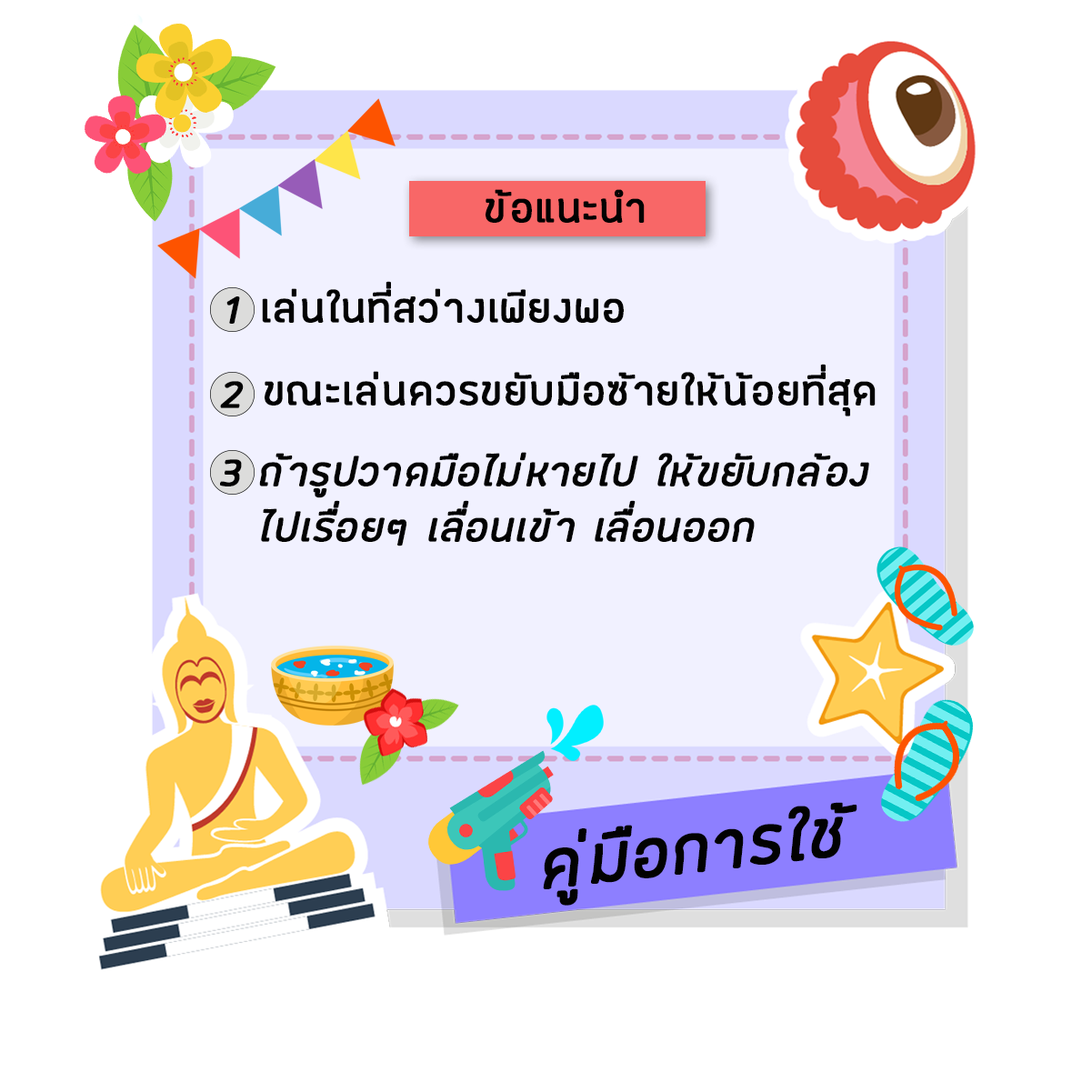
<style>
.page{position:relative;width:1092px;height:1092px;background:#ffffff}
.page>*{position:absolute;margin:0}
.t1{font:54.6px "FCLamoonRegular";letter-spacing:0.025em;color:#020202;font-weight:bold}
.t2{font:54.6px "FCLamoonRegularItalic";letter-spacing:0.025em;color:#020202;font-weight:bold}
.t3{font:54.6px/55.5px "FCLamoonRegularItalic";letter-spacing:0.025em;color:#020202;font-weight:bold}
.t4{font:89px "FCLamoonRegularItalic";letter-spacing:0.025em;color:#020202;font-weight:bold}
</style>
<div class="page">
<p class="t1" style="left:486px;top:189px;width:159px;height:34px">ข้อแนะนำ</p>
<p class="t1" style="left:262px;top:281px;width:362px;height:42px">เล่นในที่สว่างเพียงพอ</p>
<p class="t2" style="left:226px;top:296px;width:14px;height:28px">1</p>
<p class="t1" style="left:265px;top:364px;width:611px;height:52px">ขณะเล่นควรขยับมือซ้ายให้น้อยที่สุด</p>
<p class="t2" style="left:220px;top:381px;width:24px;height:27px">2</p>
<p class="t2" style="left:220px;top:459px;width:22px;height:27px">3</p>
<p class="t3" style="left:259px;top:452px;width:610px;height:94px">ถ้ารูปวาดมือไม่หายไป ให้ขยับกล้อง<br>ไปเรื่อยๆ เลื่อนเข้า เลื่อนออก</p>
<p class="t4" style="left:543px;top:802px;width:314px;height:104px;rotate:-6deg">คู่มือการใช้</p>
</div>
